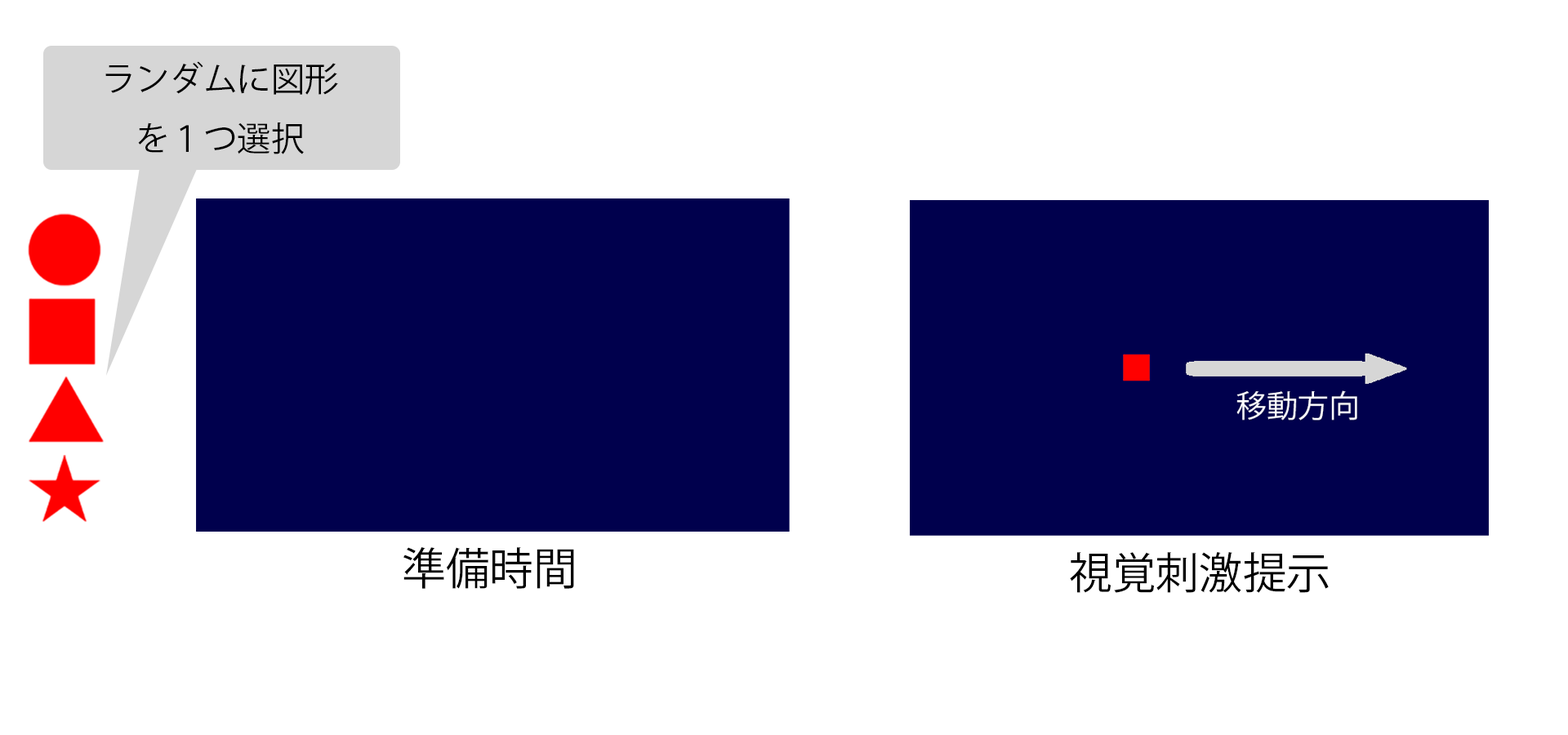
<style>
.page{position:relative;width:1568px;height:735px;background:#ffffff}
.page>*{position:absolute;margin:0}
.t1{font:34px "KozGoPr6N-Regular";color:#000000}
.t2{font:44.2px "KozGoPr6N-Regular";color:#000000}
.t3{font:43.5px "KozGoPr6N-Regular";color:#000000}
</style>
<div class="page">
<p class="t1" style="left:105px;top:61px;width:233px;height:93px;text-align:center">ランダムに図形<br>を１つ選択</p>
<p class="t2" style="left:403px;top:547px;width:171px;height:42px">準備時間</p>
<p class="t3" style="left:1070px;top:551px;width:259px;height:42px">視覚刺激提示</p>
</div>
